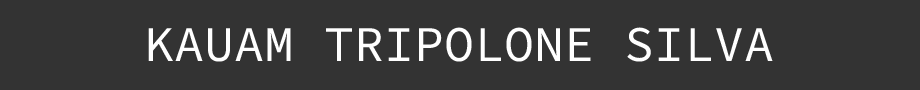
<style>
.page{position:relative;width:920px;height:90px;background:#333333}
.page>*{position:absolute;margin:0}
.t1{font:50px "SourceCodeVariable-Roman";color:#ffffff}
</style>
<div class="page">
<p class="t1" style="left:148px;top:27px;width:625px;height:35px">KAUAM TRIPOLONE SILVA</p>
</div>
